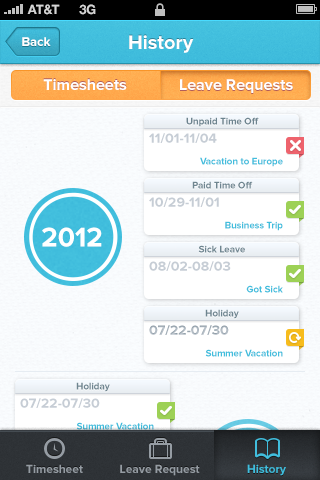
<style>
.page{position:relative;width:320px;height:480px}
.page>*{position:absolute;margin:0}
.t1{font:13px "HelveticaNeue-Bold";color:#d4d4d4;text-transform:uppercase}
.t2{font:13px "ProximaNova-Bold";color:#ffffff}
.t3{font:20px "ProximaNova-Bold";color:#ffffff}
.t4{font:16px "ProximaNova-Bold";color:#ffffff}
.t5{font:10px "ProximaNova-Bold";color:#6e8590;scale:0.97 1}
.t6{font:13.8px "ProximaNova-Bold";color:#c6cdd5}
.t7{font:10px "ProximaNova-Bold";color:#41bedd;scale:0.97 1}
.t8{font:28px "ProximaNova-Bold";color:#ffffff}
.t9{font:13.8px "ProximaNova-Bold";color:#a6b1bb}
.t10{font:12px "ProximaNova-Bold";color:#959ca3}
.t11{font:12px "ProximaNova-Bold";color:#41bedd}
</style>
<div class="page">
<p class="t1" style="left:27px;top:4px;width:33px;height:11px">AT&amp;t</p>
<p class="t1" style="left:79px;top:4px;width:17px;height:11px">3G</p>
<p class="t2" style="left:22px;top:37px;width:29px;height:9px">Back</p>
<p class="t3" style="left:129px;top:35px;width:65px;height:18px">History</p>
<p class="t4" style="left:43px;top:79px;width:84px;height:11px">Timesheets</p>
<p class="t4" style="left:180px;top:79px;width:113px;height:14px">Leave Requests</p>
<p class="t4" style="left:180px;top:79px;width:113px;height:14px">Leave Requests</p>
<p class="t5" style="left:186px;top:117px;width:73px;height:10px">Unpaid Time Off</p>
<p class="t6" style="left:149px;top:133px;width:68px;height:10px">11/01-11/04</p>
<p class="t7" style="left:200px;top:157px;width:83px;height:10px">Vacation to Europe</p>
<p class="t5" style="left:192px;top:181px;width:61px;height:8px">Paid Time Off</p>
<p class="t6" style="left:149px;top:197px;width:70px;height:10px">10/29-11/01</p>
<p class="t7" style="left:225px;top:221px;width:58px;height:10px">Business Trip</p>
<p class="t8" style="left:42px;top:227px;width:60px;height:20px">2012</p>
<p class="t5" style="left:198px;top:245px;width:47px;height:8px">Sick Leave</p>
<p class="t6" style="left:149px;top:261px;width:82px;height:10px">08/02-08/03</p>
<p class="t7" style="left:246px;top:285px;width:37px;height:8px">Got Sick</p>
<p class="t5" style="left:205px;top:309px;width:34px;height:10px">Holiday</p>
<p class="t9" style="left:149px;top:325px;width:80px;height:10px">07/22-07/30</p>
<p class="t7" style="left:205px;top:349px;width:78px;height:8px">Summer Vacation</p>
<p class="t5" style="left:76px;top:382px;width:34px;height:10px">Holiday</p>
<p class="t6" style="left:20px;top:398px;width:80px;height:10px">07/22-07/30</p>
<p class="t7" style="left:76px;top:422px;width:78px;height:8px">Summer Vacation</p>
<p class="t10" style="left:26px;top:464px;width:57px;height:9px">Timesheet</p>
<p class="t10" style="left:120px;top:464px;width:80px;height:12px">Leave Request</p>
<p class="t11" style="left:247px;top:464px;width:39px;height:12px">History</p>
<p class="t11" style="left:247px;top:464px;width:39px;height:12px">History</p>
</div>
